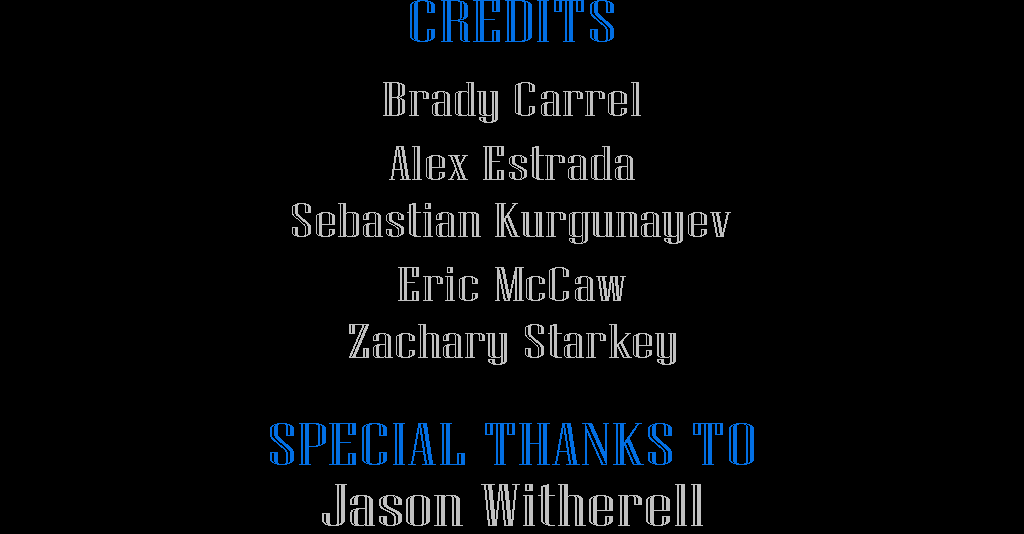
<style>
.page{position:relative;width:1024px;height:534px;background:#000000}
.page>*{position:absolute;margin:0}
.t1{font:60px "NiagaraEngraved-Reg";color:#026fe4;scale:1.77 1}
.t2{font:48px "NiagaraEngraved-Reg";color:#c0c0c0;scale:1.77 1}
.t3{font:60px "NiagaraEngraved-Reg";color:#c0c0c0;scale:1.77 1}
</style>
<div class="page">
<p class="t1" style="left:410px;top:0px;width:204px;height:42px">CREDITS</p>
<p class="t2" style="left:383px;top:82px;width:258px;height:41px">Brady Carrel</p>
<p class="t2" style="left:389px;top:146px;width:246px;height:34px">Alex Estrada</p>
<p class="t2" style="left:292px;top:203px;width:439px;height:41px">Sebastian Kurgunayev</p>
<p class="t2" style="left:398px;top:267px;width:228px;height:34px">Eric McCaw</p>
<p class="t2" style="left:349px;top:324px;width:327px;height:41px">Zachary Starkey</p>
<p class="t1" style="left:270px;top:423px;width:484px;height:42px">SPECIAL THANKS TO</p>
<p class="t3" style="left:322px;top:484px;width:381px;height:42px">Jason Witherell</p>
</div>
